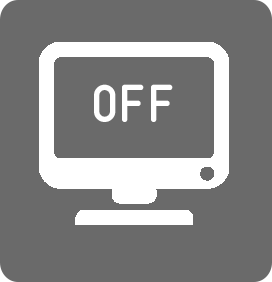
<style>
.page{position:relative;width:272px;height:282px;background:#6a6a6a}
.page>*{position:absolute;margin:0}
.t1{font:54.6px "CQMonoRUSbyDaymarius";letter-spacing:0.03em;color:#ffffff}
</style>
<div class="page">
<p class="t1" style="left:94px;top:84px;width:79px;height:38px">OFF</p>
</div>
